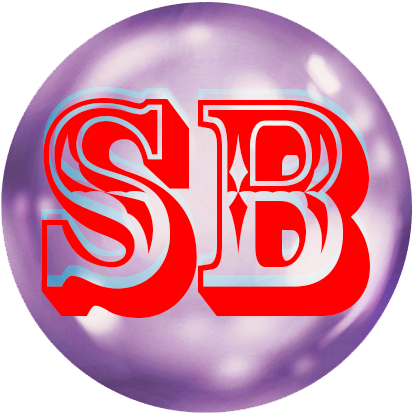
<style>
.page{position:relative;width:413px;height:413px;background:#ffffff}
.page>*{position:absolute;margin:0}
.t1{font:288.8px "RosewoodStd-Regular";color:#ff0000}
</style>
<div class="page">
<p class="t1" style="left:41px;top:97px;width:329px;height:222px">SB</p>
</div>
